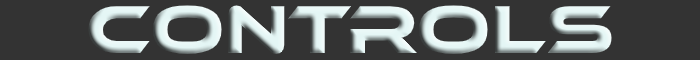
<style>
.page{position:relative;width:700px;height:60px;background:#333333}
.page>*{position:absolute;margin:0}
.t1{font:70px "EthnocentricRg-Regular";color:#e4f6f5}
</style>
<div class="page">
<p class="t1" style="left:88px;top:5px;width:524px;height:49px">CONTROLS</p>
</div>
